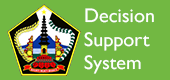
<style>
.page{position:relative;width:170px;height:80px;background:#72b842}
.page>*{position:absolute;margin:0}
.t1{font:19.9px "GillSansMT";color:#fefefe}
</style>
<div class="page">
<p class="t1" style="left:84px;top:8px;width:70px;height:66px">Decision<br>Support<br>System</p>
</div>
